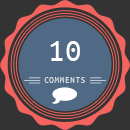
<style>
.page{position:relative;width:130px;height:130px;background:#506a85}
.page>*{position:absolute;margin:0}
.t1{font:33.5px "UbuntuMono-Regular";color:#ffffff}
.t2{font:8.7px "UbuntuMono-Regular";letter-spacing:0.1em}
</style>
<div class="page">
<p class="t1" style="left:50px;top:41px;width:30px;height:20px">10</p>
<p class="t2" style="left:44px;top:77px;width:41px;height:6px">COMMENTS</p>
</div>
